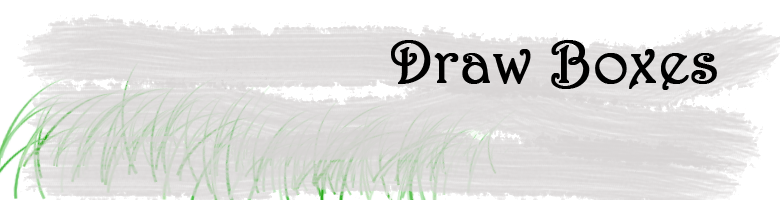
<style>
.page{position:relative;width:780px;height:200px;background:#ffffff}
.page>*{position:absolute;margin:0}
.t1{font:60px "Harrington";color:#000000;font-weight:bold}
</style>
<div class="page">
<p class="t1" style="left:391px;top:40px;width:326px;height:50px">Draw Boxes</p>
</div>
